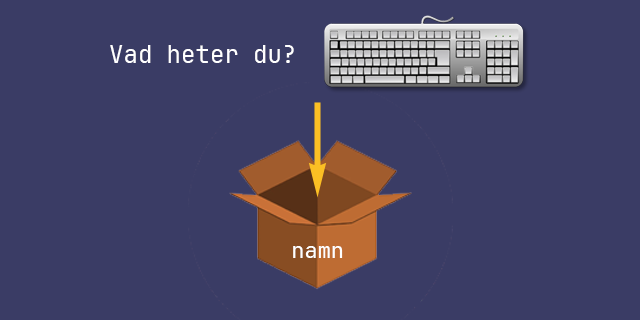
<style>
.page{position:relative;width:640px;height:320px;background:#3a3c65}
.page>*{position:absolute;margin:0}
.t1{font:24px "JetBrainsMono-Regular";color:#ffffff}
.t2{font:22px "JetBrainsMono-Regular";color:#ffffff}
</style>
<div class="page">
<p class="t1" style="left:110px;top:45px;width:184px;height:18px">Vad heter du?</p>
<p class="t2" style="left:293px;top:246px;width:50px;height:12px">namn</p>
</div>
